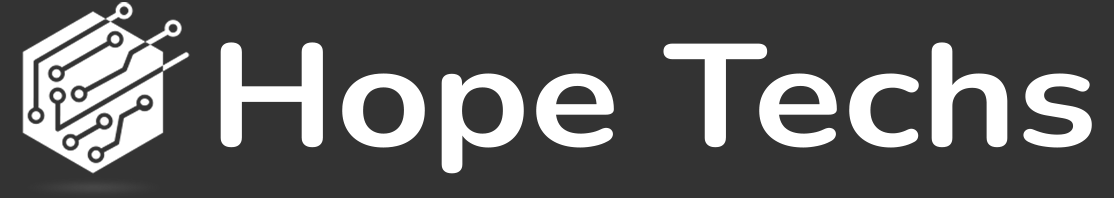
<style>
.page{position:relative;width:1114px;height:198px;background:#333333}
.page>*{position:absolute;margin:0}
.t1{font:145.2px "Nunito-Bold";color:#ffffff;font-weight:bold;scale:1.14 1}
</style>
<div class="page">
<p class="t1" style="left:220px;top:42px;width:872px;height:132px">Hope Techs</p>
</div>
